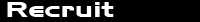
<style>
.page{position:relative;width:200px;height:22px;background:#000000}
.page>*{position:absolute;margin:0}
.t1{font:21px "HanzelExtendedNormal";color:#ffffff}
</style>
<div class="page">
<p class="t1" style="left:7px;top:2px;width:107px;height:15px">Recruit</p>
</div>
